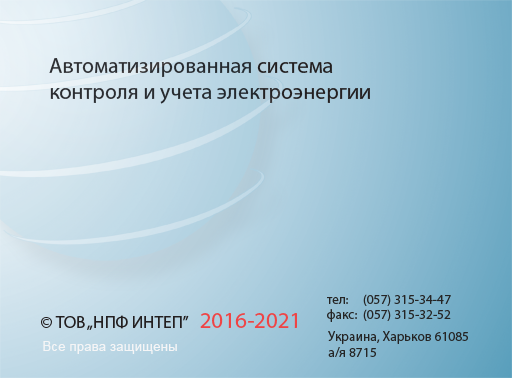
<style>
.page{position:relative;width:512px;height:378px}
.page>*{position:absolute;margin:0}
.t1{font:21.9px "MyriadPro-Regular";color:#231f20}
.t2{font:13.5px "MyriadPro-Regular";color:#252525}
.t3{font:17.3px "MyriadPro-Regular";color:#231f20}
.t4{font:23.1px "MyriadPro-Regular";color:#ef4445}
.t5{font:13.5px "ArialMT";color:#f5f5f6}
</style>
<div class="page">
<p class="t1" style="left:49px;top:58px;width:321px;height:46px">Автоматизированная система  <br>контроля и учета электроэнергии</p>
<p class="t2" style="left:327px;top:294px;width:124px;height:12px">тел:     (057) 315-34-47</p>
<p class="t3" style="left:41px;top:315px;width:148px;height:15px">© ТОВ „НПФ ИНТЕП”</p>
<p class="t4" style="left:200px;top:313px;width:97px;height:15px">2016-2021</p>
<p class="t2" style="left:327px;top:309px;width:124px;height:13px">факс:  (057) 315-32-52</p>
<p class="t5" style="left:43px;top:341px;width:134px;height:13px">Все права защищены</p>
<p class="t2" style="left:328px;top:331px;width:140px;height:26px">Украина, Харьков 61085 <br>а/я 8715</p>
</div>
